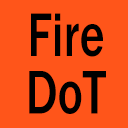
<style>
.page{position:relative;width:128px;height:128px;background:#ff551a}
.page>*{position:absolute;margin:0}
.t1{font:63.8px "FranklinGothic-Medium";color:#000000;scale:0.75 1}
</style>
<div class="page">
<p class="t1" style="left:29px;top:13px;width:77px;height:101px;text-align:center">Fire<br>DoT</p>
</div>
